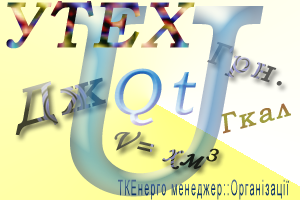
<style>
.page{position:relative;width:300px;height:200px}
.page>*{position:absolute;margin:0}
.t1{font:63.5px "BookmanOldStyle";letter-spacing:0.1em;font-weight:bold;font-style:italic}
.t2{font:264.6px "BookmanOldStyle";letter-spacing:0.1em;font-weight:bold;font-style:italic}
.t3{font:31.8px "BookmanOldStyle";letter-spacing:0.1em;font-weight:bold;font-style:italic}
.t4{font:50.8px "BookmanOldStyle";letter-spacing:0.1em;font-weight:bold;font-style:italic}
.t5{font:26.5px "BookmanOldStyle";letter-spacing:0.1em;color:#a0943f;font-weight:bold;font-style:italic}
.t6{font:31.7px "MonotypeCorsiva";letter-spacing:0.1em;font-weight:bold;font-style:italic}
.t7{font:31.7px "BookmanOldStyle";letter-spacing:0.1em;font-weight:bold;font-style:italic}
.t8{font:21.6px "ArialMT";letter-spacing:0.1em;scale:0.41 1}
</style>
<div class="page">
<p class="t1" style="left:6px;top:1px;width:189px;height:48px">УТЕХ</p>
<p class="t2" style="left:66px;top:6px;width:198px;height:191px">U</p>
<p class="t3" style="left:207px;top:41px;width:75px;height:45px;rotate:18deg">Грн.</p>
<p class="t4" style="left:15px;top:77px;width:91px;height:59px;rotate:-16deg">Дж</p>
<p class="t1" style="left:114px;top:68px;width:82px;height:58px">Qt</p>
<p class="t5" style="left:221px;top:103px;width:70px;height:31px;rotate:-15deg">Гкал</p>
<p class="t6" style="left:114px;top:131px;width:105px;height:39px;rotate:14deg">V= xм<span class="t7">3</span></p>
<p class="t8" style="left:118px;top:179px;width:171px;height:21px">ТКЕнерго менеджер::Органiзацiї</p>
</div>
